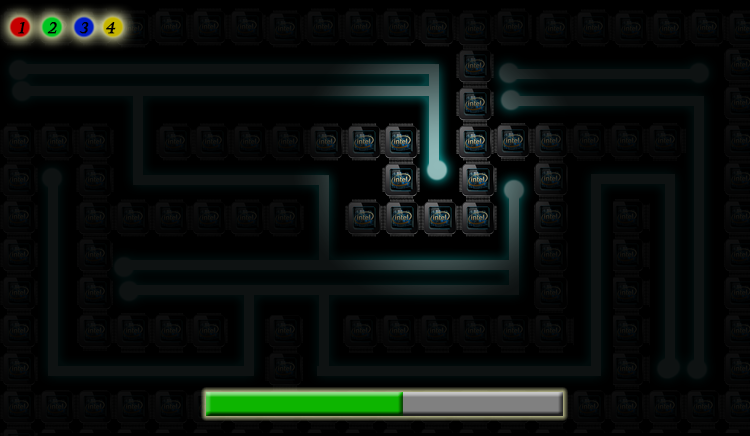
<style>
.page{position:relative;width:750px;height:436px}
.page>*{position:absolute;margin:0}
.t1{font:15px "Castellar";color:#000000;font-weight:bold;font-style:italic}
</style>
<div class="page">
<p class="t1" style="left:18px;top:22px;width:98px;height:12px">1    2    3   4</p>
</div>
